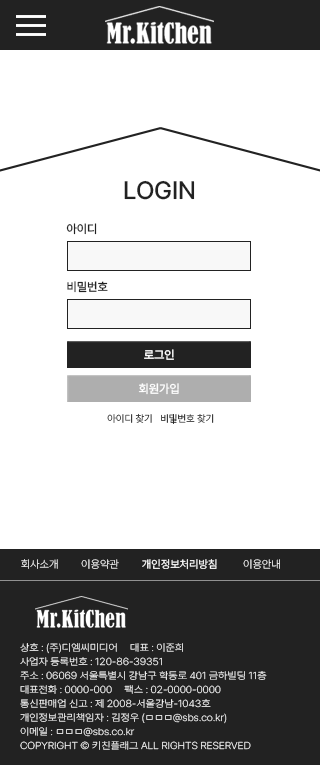
<style>
.page{position:relative;width:320px;height:765px;background:#ffffff}
.page>*{position:absolute;margin:0}
.t1{font:25px "PretendardVariable-Medium";letter-spacing:-0.005em;color:#222222}
.t2{font:12px "PretendardVariable-Medium";letter-spacing:-0.005em;color:#222222}
.t3{font:12px "PretendardVariable-Medium";letter-spacing:-0.005em;color:#ffffff}
.t4{font:10px "PretendardVariable-Light";letter-spacing:-0.005em}
.t5{font:11px "PretendardVariable-ExtraLight";letter-spacing:-0.005em}
.t6{font:11px "PretendardVariable-Regular";letter-spacing:-0.005em;color:#ffffff}
.t7{font:11px "PretendardVariable-ExtraLight";letter-spacing:-0.005em;color:#ffffff}
.t8{font:10px/14px "PretendardVariable-ExtraLight";letter-spacing:-0.005em;color:#fefefe;scale:1.08 1}
</style>
<div class="page">
<p class="t1" style="left:124px;top:180px;width:71px;height:20px">LOGIN</p>
<p class="t2" style="left:66px;top:223px;width:31px;height:12px">아이디</p>
<p class="t2" style="left:67px;top:281px;width:41px;height:12px">비밀번호</p>
<p class="t3" style="left:144px;top:349px;width:30px;height:11px">로그인</p>
<p class="t3" style="left:138px;top:383px;width:41px;height:12px">회원가입</p>
<p class="t4" style="left:107px;top:413px;width:45px;height:10px">아이디 찾기</p>
<p class="t4" style="left:161px;top:414px;width:53px;height:9px">비밀번호 찾기</p>
<p class="t5" style="left:21px;top:559px;width:37px;height:10px">회사소개</p>
<p class="t5" style="left:81px;top:559px;width:38px;height:10px">이용약관</p>
<p class="t6" style="left:142px;top:559px;width:75px;height:11px">개인정보처리방침</p>
<p class="t7" style="left:243px;top:559px;width:37px;height:10px">이용안내</p>
<p class="t8" style="left:20px;top:643px;width:247px;height:107px">상호 : (주)디엠씨미디어     대표 : 이준희     <br>사업자 등록번호 : 120-86-39351<br>주소 : 06069 서울특별시 강남구 학동로 401 금하빌딩 11층<br>대표전화 : 0000-000     팩스 : 02-0000-0000     <br>통신판매업 신고 : 제 2008-서울강남-1043호<br>개인정보관리책임자 : 김정우 (ㅁㅁㅁ@sbs.co.kr)     <br>이메일 : ㅁㅁㅁ@sbs.co.kr<br>COPYRIGHT © 키친플래그 ALL RIGHTS RESERVED</p>
</div>
